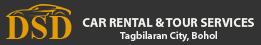
<style>
.page{position:relative;width:261px;height:45px;background:#333333}
.page>*{position:absolute;margin:0}
.t1{font:34.1px "TimesNewRomanPS-BoldMT";color:#e49c00}
.t2{font:13.4px "MyriadPro-Bold";color:#f2f1ee;text-transform:uppercase;scale:0.95 1}
.t3{font:10.5px "MyriadPro-Semibold";color:#f2f1ee}
</style>
<div class="page">
<p class="t1" style="left:6px;top:16px;width:66px;height:23px">DSD</p>
<p class="t2" style="left:82px;top:18px;width:172px;height:9px">CAR Rental &amp; Tour Services</p>
<p class="t3" style="left:120px;top:31px;width:97px;height:11px">Tagbilaran City, Bohol</p>
</div>
